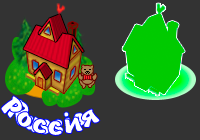
<style>
.page{position:relative;width:200px;height:140px;background:#333333}
.page>*{position:absolute;margin:0}
.t1{font:30px "BrushType-Bold";letter-spacing:0.05em;color:#ffffff}
</style>
<div class="page">
<p class="t1" style="left:1px;top:96px;width:99px;height:39px;rotate:6deg">Ðîññèÿ</p>
</div>
